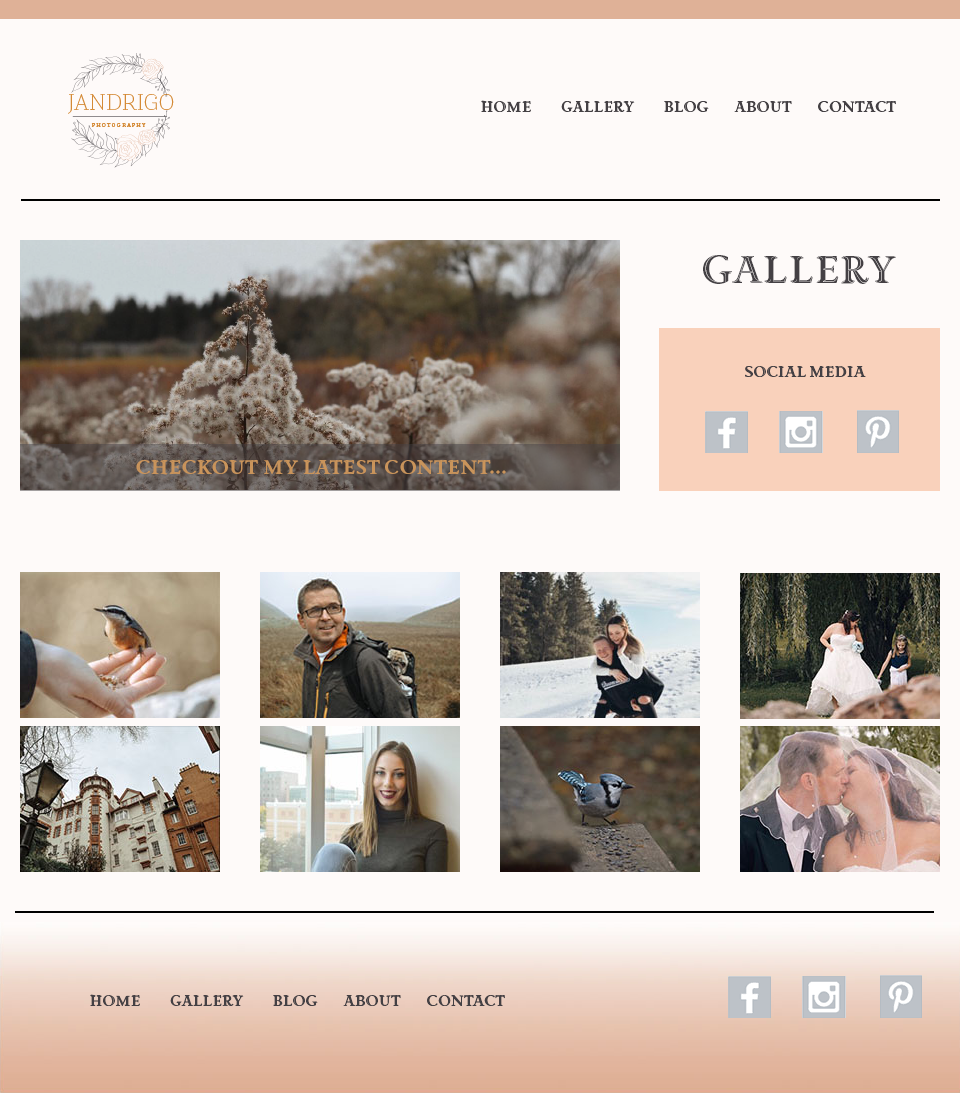
<style>
.page{position:relative;width:960px;height:1093px;background:#fefaf9}
.page>*{position:absolute;margin:0}
.t1{font:18px "PrioriAcuteOT-Serif";color:#444044}
.t2{font:48px "PrioriAcuteOT-Serif";color:#444044}
</style>
<div class="page">
<p class="t1" style="left:481px;top:100px;width:415px;height:12px">Home         Gallery         Blog        About        Contact</p>
<p class="t2" style="left:703px;top:255px;width:193px;height:29px">Gallery</p>
<p class="t1" style="left:745px;top:366px;width:121px;height:11px">Social Media</p>
<p class="t1" style="left:90px;top:994px;width:415px;height:12px">Home         Gallery         Blog        About        Contact</p>
</div>
